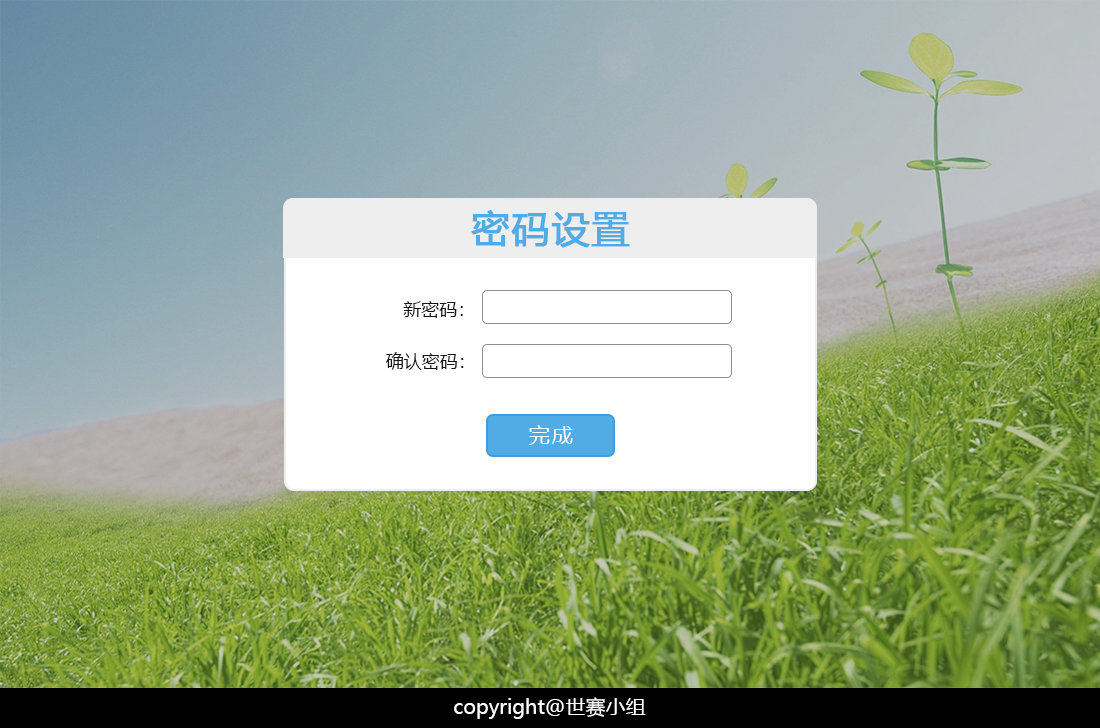
<style>
.page{position:relative;width:1100px;height:728px}
.page>*{position:absolute;margin:0}
.t1{font:38px "MicrosoftYaHei";letter-spacing:0.025em;color:#51abe5;font-weight:bold}
.t2{font:18px "MicrosoftYaHei";color:#141414}
.t3{font:20.8px "MicrosoftYaHei";letter-spacing:0.1em;color:#fefefe}
.t4{font:20px "MicrosoftYaHei";color:#ffffff}
</style>
<div class="page">
<p class="t1" style="left:471px;top:210px;width:159px;height:38px">密码设置</p>
<p class="t2" style="left:403px;top:301px;width:60px;height:17px">新密码：</p>
<p class="t2" style="left:385px;top:352px;width:79px;height:18px">确认密码：</p>
<p class="t3" style="left:529px;top:425px;width:44px;height:20px">完成</p>
<p class="t4" style="left:454px;top:697px;width:192px;height:22px">copyright@世赛小组</p>
</div>
